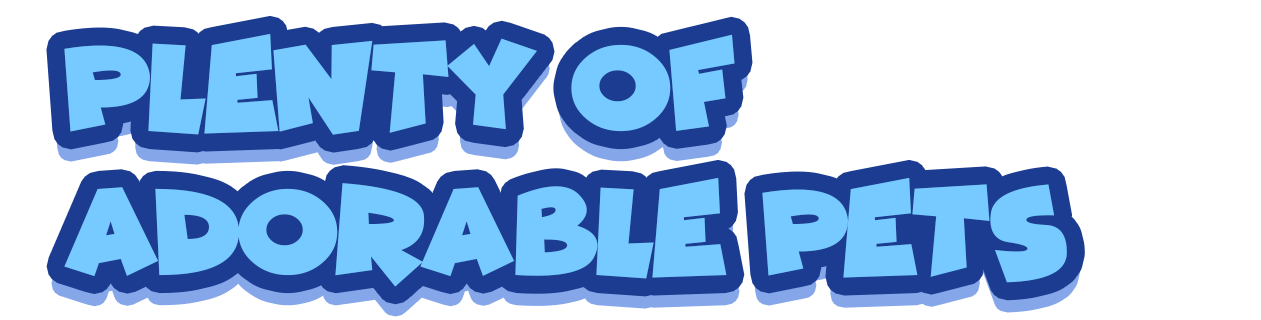
<style>
.page{position:relative;width:1261px;height:320px;background:#ffffff}
.page>*{position:absolute;margin:0}
.t1{font:120px "ComicKings";letter-spacing:-0.01em;color:#76caff}
</style>
<div class="page">
<p class="t1" style="left:64px;top:33px;width:1003px;height:254px">Plenty of<br>adorable pets</p>
</div>
